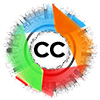
<style>
.page{position:relative;width:100px;height:100px;background:#ffffff}
.page>*{position:absolute;margin:0}
.t1{font:20.8px "CenturyGothic-Bold";color:#000000;font-weight:bold}
</style>
<div class="page">
<p class="t1" style="left:34px;top:41px;width:31px;height:17px">CC</p>
</div>
